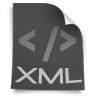
<style>
.page{position:relative;width:96px;height:96px;background:#ffffff}
.page>*{position:absolute;margin:0}
.t1{font:21.3px "PirulenRg-Regular";color:#c2c2c2}
</style>
<div class="page">
<p class="t1" style="left:15px;top:66px;width:67px;height:18px">XML</p>
</div>
